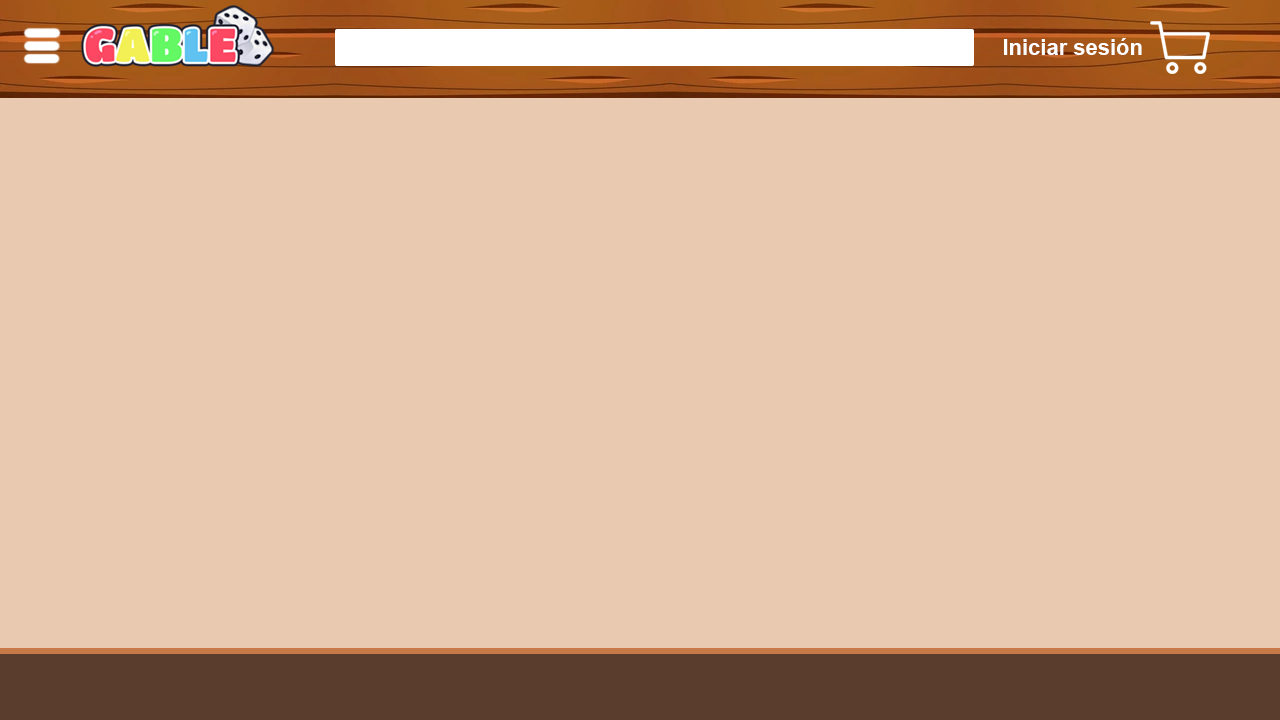
<style>
.page{position:relative;width:1280px;height:720px;background:#e9c9b0}
.page>*{position:absolute;margin:0}
.t1{font:22px "Arial-BoldMT";color:#ffffff}
</style>
<div class="page">
<p class="t1" style="left:1004px;top:38px;width:138px;height:17px">Iniciar sesión</p>
</div>
